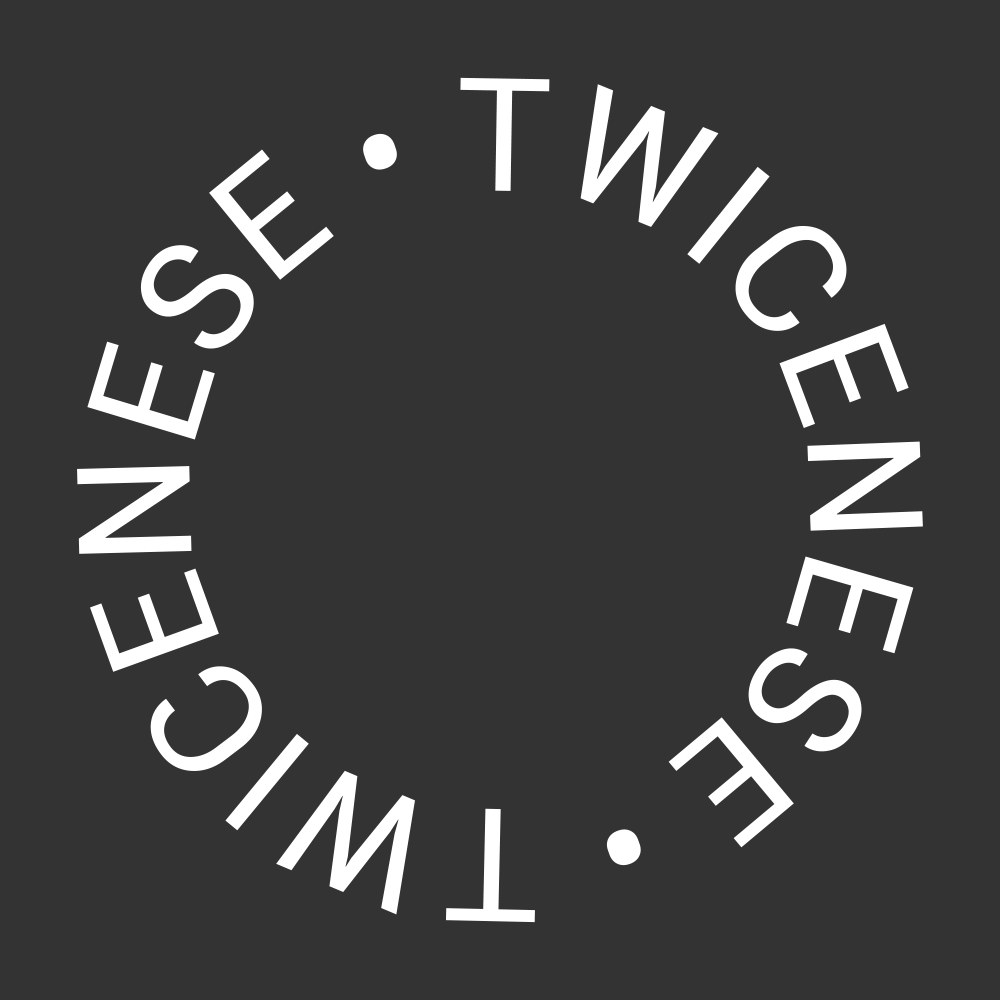
<style>
.page{position:relative;width:1000px;height:1000px;background:#333333}
.page>*{position:absolute;margin:0}
.t1{font:157.7px "Roboto-Regular";color:#ffffff}
</style>
<div class="page">
<p class="t1" style="left:77px;top:77px;width:846px;height:846px">TWICENESE • TWICENESE •</p>
</div>
